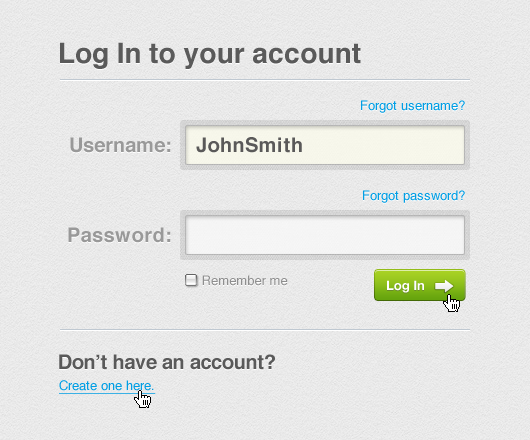
<style>
.page{position:relative;width:530px;height:440px}
.page>*{position:absolute;margin:0}
.t1{font:28px "Helvetica-Bold";color:#5a5a5a}
.t2{font:13px "Helvetica";color:#009ee4}
.t3{font:20px "Helvetica-Bold";color:#999999}
.t4{font:20px "Helvetica-Bold";letter-spacing:0.025em;color:#5a5959}
.t5{font:20px "Helvetica-Bold";letter-spacing:0.025em;color:#999999}
.t6{font:13px "Helvetica";color:#8f8f8f}
.t7{font:13px "HelveticaNeue-Bold";color:#ffffff}
.t8{font:20px "Helvetica-Bold";color:#5a5a5a}
.t9{font:13px "Helvetica";color:#009ee4;text-decoration:underline}
</style>
<div class="page">
<p class="t1" style="left:60px;top:42px;width:301px;height:27px">Log In to your account</p>
<p class="t2" style="left:361px;top:100px;width:104px;height:13px">Forgot username?</p>
<p class="t3" style="left:70px;top:137px;width:101px;height:16px">Username:</p>
<p class="t4" style="left:196px;top:137px;width:106px;height:16px">JohnSmith</p>
<p class="t2" style="left:363px;top:190px;width:102px;height:13px">Forgot password?</p>
<p class="t5" style="left:68px;top:227px;width:103px;height:16px">Password:</p>
<p class="t6" style="left:202px;top:275px;width:86px;height:11px">Remember me</p>
<p class="t7" style="left:387px;top:280px;width:37px;height:13px">Log In</p>
<p class="t8" style="left:59px;top:354px;width:216px;height:16px">Don’t have an account?</p>
<p class="t9" style="left:59px;top:380px;width:97px;height:14px">Create one here.</p>
</div>
